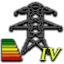
<style>
.page{position:relative;width:64px;height:64px;background:#ffffff}
.page>*{position:absolute;margin:0}
.t1{font:16px "TrajanPro-Bold";color:#deff01;font-style:italic}
</style>
<div class="page">
<p class="t1" style="left:40px;top:48px;width:22px;height:12px">IV</p>
</div>
